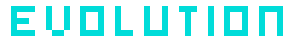
<style>
.page{position:relative;width:294px;height:42px;background:#ffffff}
.page>*{position:absolute;margin:0}
.t1{font:48px "hooge05_55Cyr2";letter-spacing:0.1em;color:#00dcd9}
</style>
<div class="page">
<p class="t1" style="left:11px;top:6px;width:272px;height:30px">EVOLUTION</p>
</div>
